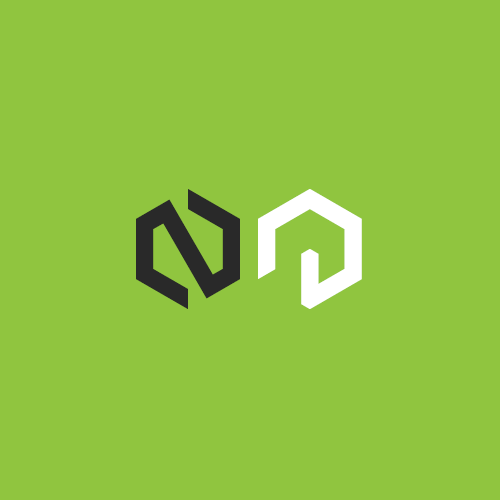
<style>
.page{position:relative;width:500px;height:500px;background:#90c53f}
.page>*{position:absolute;margin:0}
.t1{font:120px "NanoCore-Medium";letter-spacing:0.02em;color:#292929}
.t2{font:120px "NanoCore-Medium";letter-spacing:0.02em;color:#ffffff}
</style>
<div class="page">
<p class="t1" style="left:136px;top:189px;width:226px;height:120px">N<span class="t2">P</span></p>
</div>
